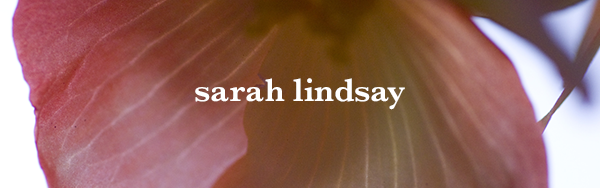
<style>
.page{position:relative;width:600px;height:188px}
.page>*{position:absolute;margin:0}
.t1{font:33.5px "Baskerville-SemiBold";color:#ffffff}
</style>
<div class="page">
<p class="t1" style="left:195px;top:78px;width:210px;height:32px">sarah lindsay</p>
</div>
